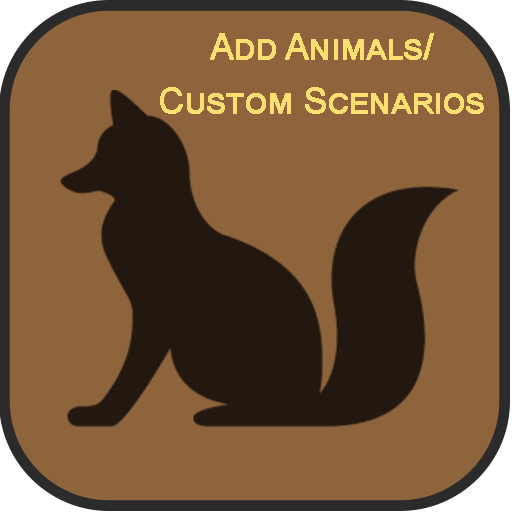
<style>
.page{position:relative;width:512px;height:512px;background:#8d643b}
.page>*{position:absolute;margin:0}
.t1{font:36px/18px "ArialMT";letter-spacing:-0.025em;color:#fede70;font-variant:small-caps;font-weight:bold}
</style>
<div class="page">
<p class="t1" style="left:160px;top:33px;width:324px;height:81px;text-align:center">Add Animals/<br><br><br>Custom Scenarios</p>
</div>
